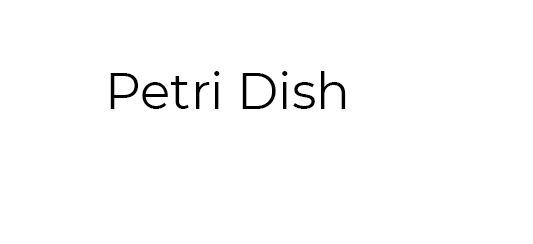
<style>
.page{position:relative;width:533px;height:244px;background:#ffffff}
.page>*{position:absolute;margin:0}
.t1{font:50px "Montserrat-Regular";color:#000000}
</style>
<div class="page">
<p class="t1" style="left:110px;top:71px;width:236px;height:38px">Petri Dish</p>
</div>
